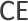
<style>
.page{position:relative;width:28px;height:21px;background:#ffffff}
.page>*{position:absolute;margin:0}
.t1{font:30px "Calibri";color:#3c3c3c}
</style>
<div class="page">
<p class="t1" style="left:0px;top:0px;width:28px;height:21px">CE</p>
</div>
